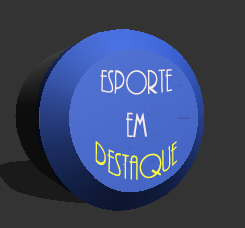
<style>
.page{position:relative;width:245px;height:228px;background:#333333}
.page>*{position:absolute;margin:0}
.t1{font:29.6px "ARBONNIE";color:#f6ecec}
.t2{font:29.6px "ARBONNIE";color:#ffff33}
</style>
<div class="page">
<p class="t1" style="left:95px;top:69px;width:82px;height:111px;text-align:center">esporte<br>em<br><span class="t2">destaque</span></p>
</div>
